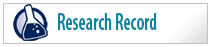
<style>
.page{position:relative;width:211px;height:47px;background:#ffffff}
.page>*{position:absolute;margin:0}
.t1{font:24px "MyriadPro-SemiboldCond";color:#11839a;scale:0.78 1}
</style>
<div class="page">
<p class="t1" style="left:58px;top:13px;width:99px;height:17px">Research Record</p>
</div>
